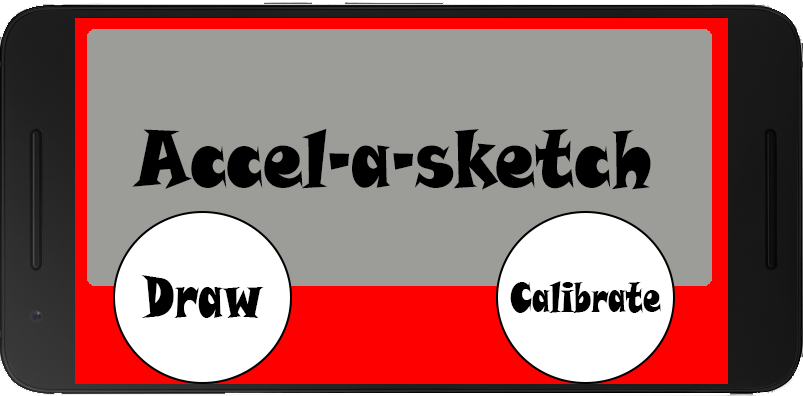
<style>
.page{position:relative;width:803px;height:396px;background:#9c9d98}
.page>*{position:absolute;margin:0}
.t1{font:79.4px "SnapITC-Regular";color:#000000;scale:0.8 1}
.t2{font:57.4px "SnapITC-Regular";color:#000000;scale:0.69 1}
.t3{font:41.5px "SnapITC-Regular";color:#000000;scale:0.68 1}
</style>
<div class="page">
<p class="t1" style="left:132px;top:128px;width:519px;height:62px">Accel-a-sketch</p>
<p class="t2" style="left:141px;top:275px;width:123px;height:43px">Draw</p>
<p class="t3" style="left:510px;top:281px;width:151px;height:32px">Calibrate</p>
</div>
